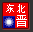
<style>
.page{position:relative;width:33px;height:32px;background:#f20000}
.page>*{position:absolute;margin:0}
.t1{font:10.4px "SimSun";color:#ffffff}
.t2{font:11.7px "SimSun";color:#ffffff}
</style>
<div class="page">
<p class="t1" style="left:6px;top:4px;width:19px;height:9px">东北</p>
<p class="t2" style="left:16px;top:15px;width:11px;height:12px">晋</p>
</div>
